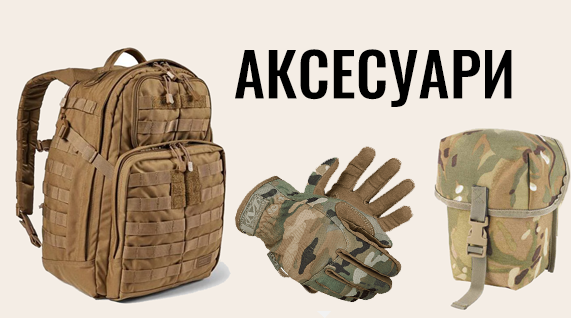
<style>
.page{position:relative;width:571px;height:318px;background:#f4ede5}
.page>*{position:absolute;margin:0}
.t1{font:60px "Oswald-Medium";color:#000000}
</style>
<div class="page">
<p class="t1" style="left:235px;top:49px;width:277px;height:58px">АКСЕСУАРИ</p>
</div>
